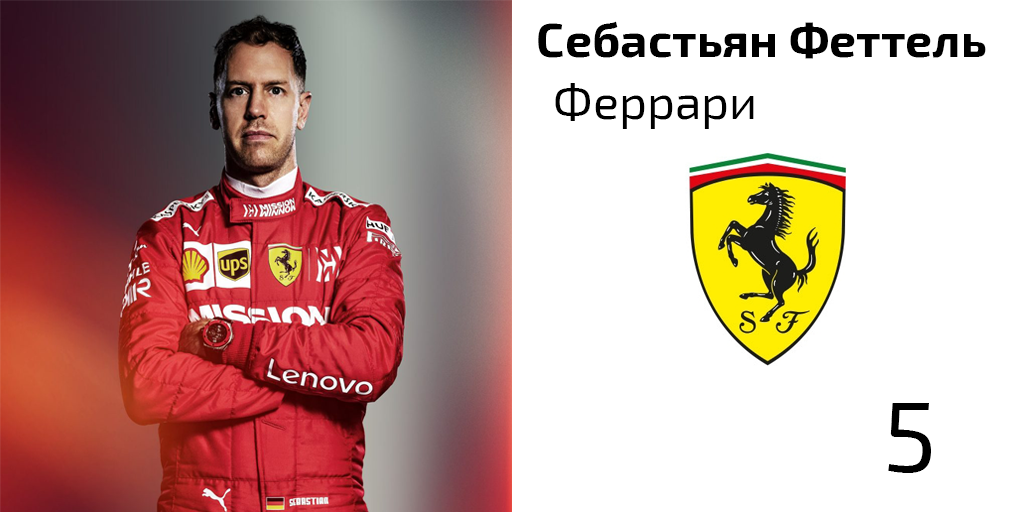
<style>
.page{position:relative;width:1024px;height:512px;background:#ffffff}
.page>*{position:absolute;margin:0}
.t1{font:48px "Exo2-Bold";color:#000000}
.t2{font:48px "Exo2-Regular";color:#000000}
.t3{font:100px "Exo2-Regular";color:#000000}
</style>
<div class="page">
<p class="t1" style="left:538px;top:21px;width:448px;height:38px">Себастьян Феттель</p>
<p class="t2" style="left:555px;top:83px;width:199px;height:46px">Феррари</p>
<p class="t3" style="left:888px;top:403px;width:43px;height:70px">5</p>
</div>
